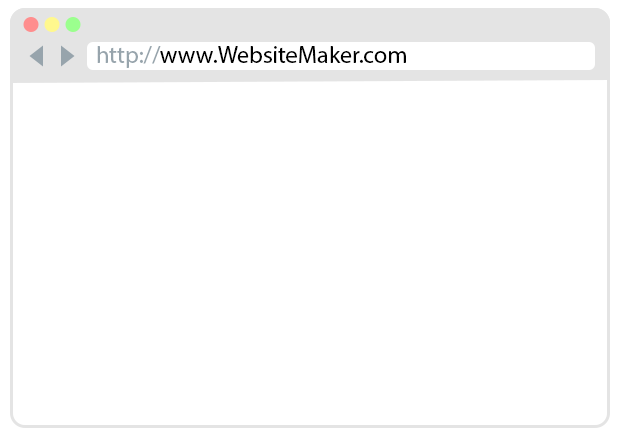
<style>
.page{position:relative;width:622px;height:438px;background:#ffffff}
.page>*{position:absolute;margin:0}
.t1{font:24px "MyriadPro-Regular";color:#000000}
.t2{font:24px "MyriadPro-Regular";color:#97a4ac}
</style>
<div class="page">
<p class="t1" style="left:97px;top:46px;width:309px;height:22px"><span class="t2">http://</span>www.WebsiteMaker.com</p>
</div>
